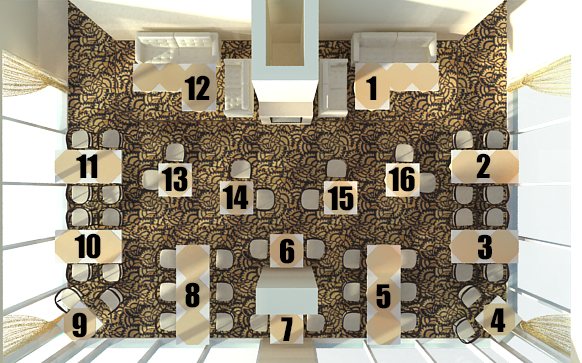
<style>
.page{position:relative;width:582px;height:363px}
.page>*{position:absolute;margin:0}
.t1{font:30px "Impact";color:#000000}
</style>
<div class="page">
<p class="t1" style="left:184px;top:75px;width:26px;height:25px">12</p>
<p class="t1" style="left:366px;top:76px;width:11px;height:24px">1</p>
<p class="t1" style="left:76px;top:154px;width:22px;height:24px">11</p>
<p class="t1" style="left:476px;top:153px;width:15px;height:25px">2</p>
<p class="t1" style="left:161px;top:166px;width:27px;height:26px">13</p>
<p class="t1" style="left:388px;top:166px;width:27px;height:26px">16</p>
<p class="t1" style="left:222px;top:185px;width:27px;height:24px">14</p>
<p class="t1" style="left:327px;top:186px;width:27px;height:25px">15</p>
<p class="t1" style="left:74px;top:233px;width:27px;height:26px">10</p>
<p class="t1" style="left:280px;top:238px;width:15px;height:26px">6</p>
<p class="t1" style="left:478px;top:234px;width:14px;height:26px">3</p>
<p class="t1" style="left:185px;top:282px;width:15px;height:26px">8</p>
<p class="t1" style="left:376px;top:284px;width:15px;height:25px">5</p>
<p class="t1" style="left:72px;top:312px;width:15px;height:26px">9</p>
<p class="t1" style="left:281px;top:317px;width:12px;height:24px">7</p>
<p class="t1" style="left:490px;top:308px;width:16px;height:24px">4</p>
</div>
